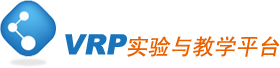
<style>
.page{position:relative;width:280px;height:68px;background:#ffffff}
.page>*{position:absolute;margin:0}
.t1{font:22px "SimHei";color:#eb6100;font-style:italic}
.t2{font:28px "Arial-Black";color:#1a74bb;font-style:italic}
</style>
<div class="page">
<p class="t1" style="left:65px;top:34px;width:215px;height:23px"><span class="t2">VRP</span>实验与教学平台</p>
</div>
